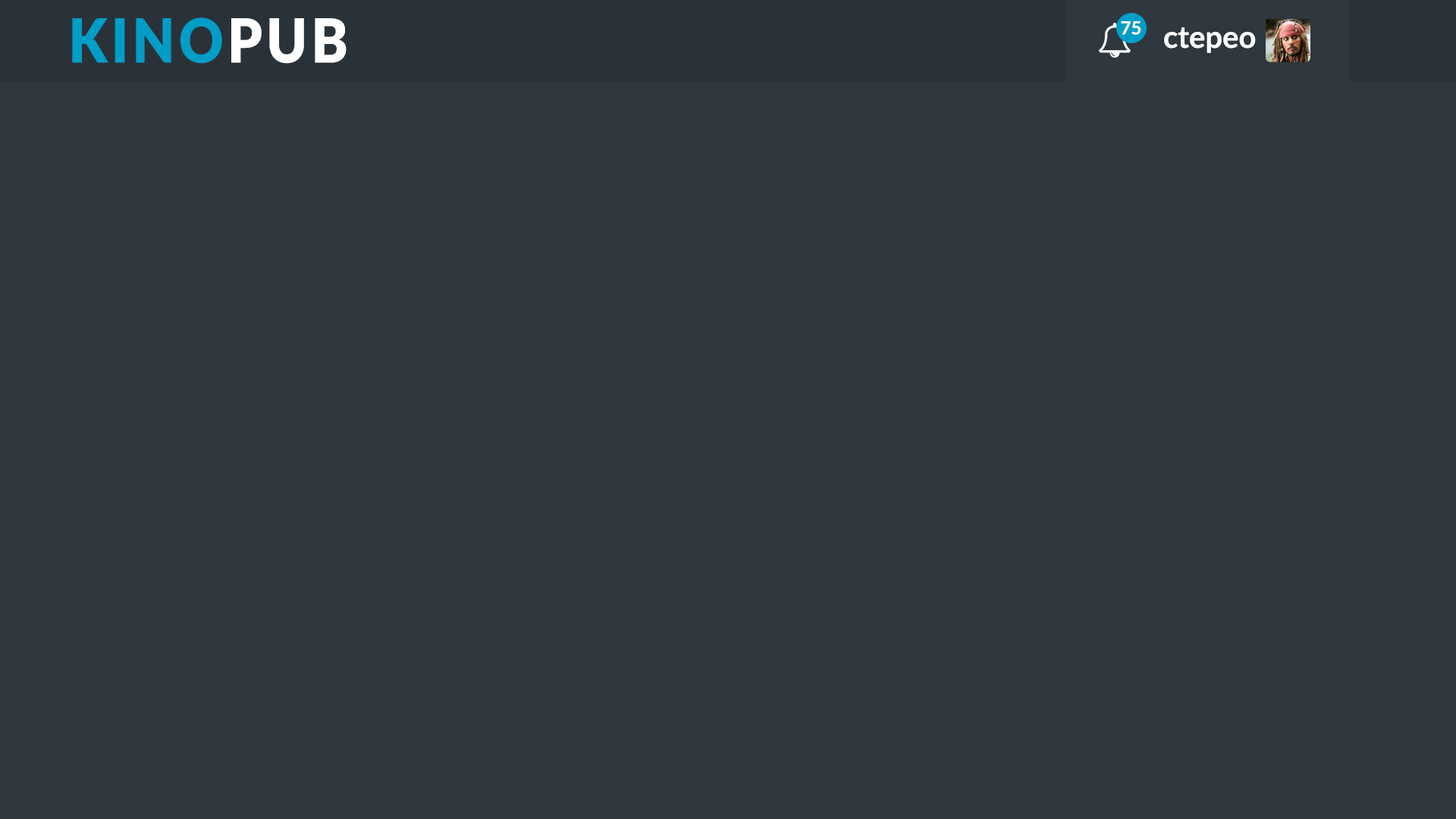
<style>
.page{position:relative;width:1456px;height:819px;background:#2f373f}
.page>*{position:absolute;margin:0}
.t1{font:60.7px "LatoLatin-Black";letter-spacing:0.075em;color:#009dc7;scale:0.9 1}
.t2{font:60.7px "LatoLatin-Black";letter-spacing:0.075em;color:#ffffff;scale:0.9 1}
.t3{font:18.2px "Lato-Bold";color:#ffffff}
.t4{font:30.3px "Lato-Bold";color:#ffffff}
</style>
<div class="page">
<p class="t1" style="left:72px;top:17px;width:275px;height:47px">KINO<span class="t2">PUB</span></p>
<p class="t3" style="left:1121px;top:21px;width:20px;height:14px">75</p>
<p class="t4" style="left:1164px;top:27px;width:92px;height:26px">ctepeo</p>
</div>
